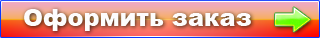
<style>
.page{position:relative;width:320px;height:38px}
.page>*{position:absolute;margin:0}
.t1{font:24px "Arial-Black";color:#fdfcfc}
</style>
<div class="page">
<p class="t1" style="left:24px;top:9px;width:227px;height:22px">Оформить заказ</p>
</div>
